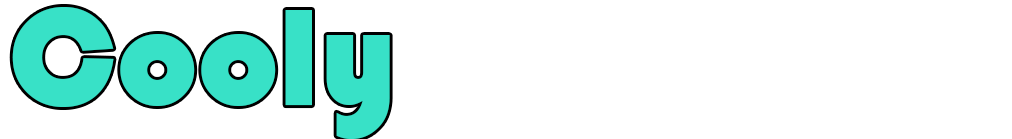
<style>
.page{position:relative;width:1012px;height:139px;background:#ffffff}
.page>*{position:absolute;margin:0}
.t1{font:143.5px "Bauhaus93";color:#38e1c7}
</style>
<div class="page">
<p class="t1" style="left:12px;top:7px;width:378px;height:132px">Cooly</p>
</div>
